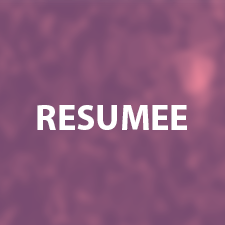
<style>
.page{position:relative;width:225px;height:225px}
.page>*{position:absolute;margin:0}
.t1{font:36px "MyriadPro-Bold";color:#ffffff}
</style>
<div class="page">
<p class="t1" style="left:37px;top:105px;width:150px;height:25px">RESUMEE</p>
</div>
